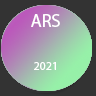
<style>
.page{position:relative;width:96px;height:96px;background:#333333}
.page>*{position:absolute;margin:0}
.t1{font:18px "MyriadPro-Regular";color:#ffffff}
.t2{font:12px "MyriadPro-Regular";color:#ffffff}
</style>
<div class="page">
<p class="t1" style="left:31px;top:14px;width:29px;height:13px">ARS</p>
<p class="t2" style="left:34px;top:62px;width:22px;height:8px">2021</p>
</div>
